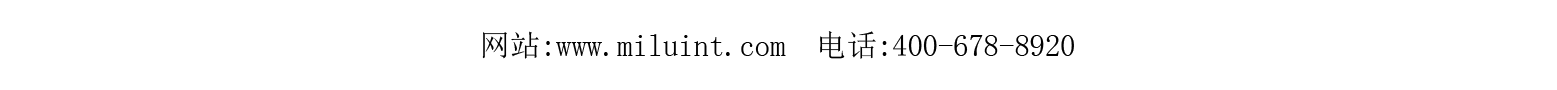
<style>
.page{position:relative;width:1557px;height:90px;background:#ffffff}
.page>*{position:absolute;margin:0}
.t1{font:30.6px "SimSun";color:#000000}
</style>
<div class="page">
<p class="t1" style="left:482px;top:31px;width:592px;height:28px">网站:www.miluint.com  电话:400-678-8920</p>
</div>
